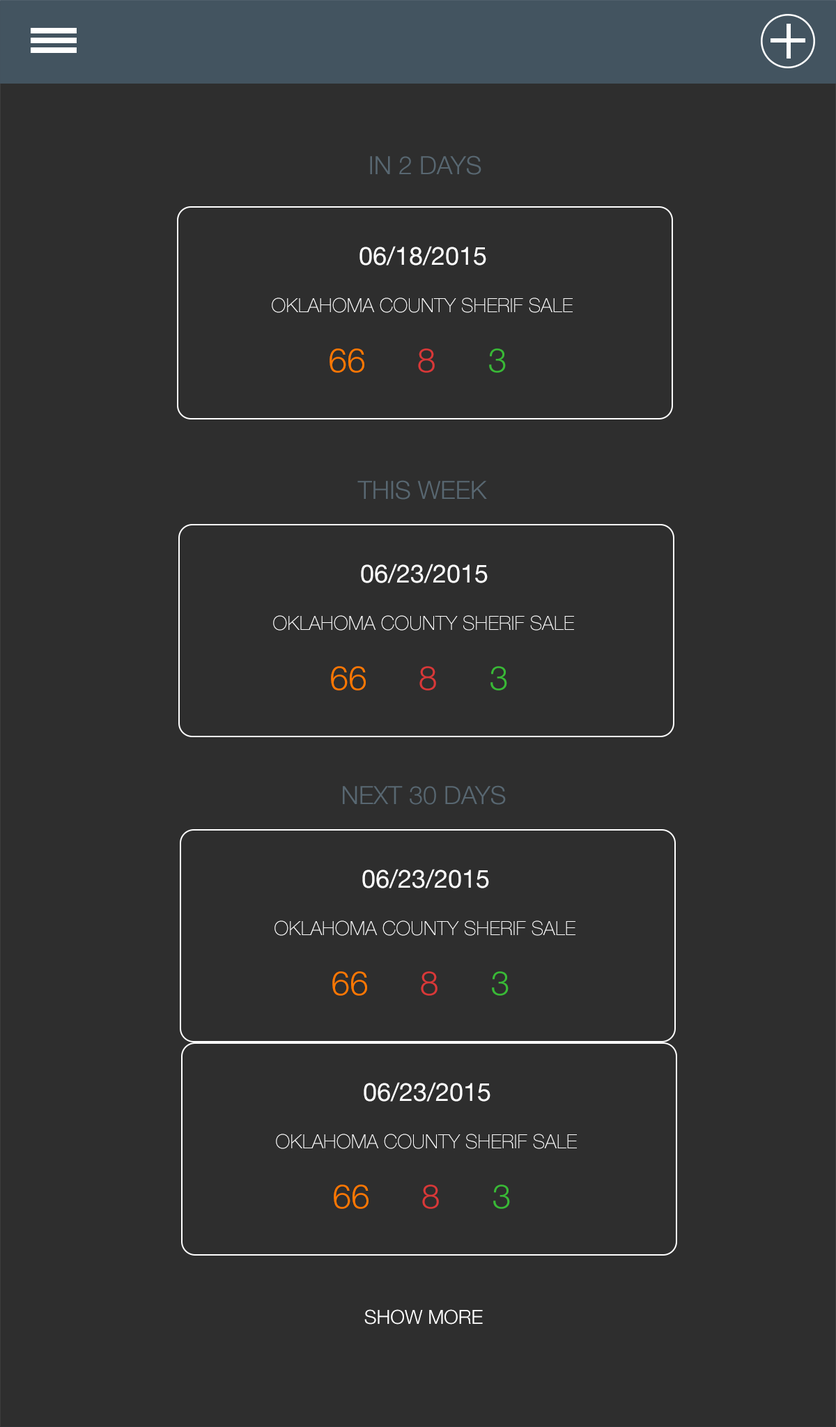
<style>
.page{position:relative;width:836px;height:1427px;background:#2e2e2e}
.page>*{position:absolute;margin:0}
.t1{font:25.1px "HelveticaNeue-Light";color:#586771;text-transform:uppercase}
.t2{font:25.1px "HelveticaNeue";color:#fefefe;text-transform:uppercase}
.t3{font:19.5px "HelveticaNeue-Thin";color:#fefefe;text-transform:uppercase}
.t4{font:33.4px "HelveticaNeue-Light";color:#ff7800;text-transform:uppercase}
.t5{font:33.4px "HelveticaNeue-Light";color:#d93838;text-transform:uppercase}
.t6{font:33.4px "HelveticaNeue-Light";color:#39b936;text-transform:uppercase}
.t7{font:19.5px "HelveticaNeue-Light";color:#ffffff;text-transform:uppercase}
</style>
<div class="page">
<p class="t1" style="left:370px;top:155px;width:111px;height:20px">In 2 days</p>
<p class="t2" style="left:359px;top:246px;width:127px;height:19px">06/18/2015</p>
<p class="t3" style="left:272px;top:297px;width:301px;height:16px">Oklahoma County Sherif Sale</p>
<p class="t4" style="left:329px;top:348px;width:35px;height:25px">66</p>
<p class="t5" style="left:418px;top:348px;width:17px;height:25px">8</p>
<p class="t6" style="left:489px;top:348px;width:17px;height:25px">3</p>
<p class="t1" style="left:357px;top:480px;width:130px;height:19px">This week</p>
<p class="t2" style="left:361px;top:564px;width:127px;height:19px">06/23/2015</p>
<p class="t3" style="left:273px;top:615px;width:301px;height:15px">Oklahoma County Sherif Sale</p>
<p class="t4" style="left:331px;top:666px;width:35px;height:24px">66</p>
<p class="t5" style="left:419px;top:666px;width:17px;height:24px">8</p>
<p class="t6" style="left:490px;top:666px;width:17px;height:24px">3</p>
<p class="t1" style="left:343px;top:785px;width:163px;height:20px">next 30 days</p>
<p class="t2" style="left:362px;top:869px;width:127px;height:19px">06/23/2015</p>
<p class="t3" style="left:274px;top:920px;width:301px;height:15px">Oklahoma County Sherif Sale</p>
<p class="t4" style="left:332px;top:971px;width:35px;height:24px">66</p>
<p class="t5" style="left:421px;top:971px;width:16px;height:24px">8</p>
<p class="t6" style="left:492px;top:971px;width:16px;height:24px">3</p>
<p class="t2" style="left:364px;top:1082px;width:126px;height:19px">06/23/2015</p>
<p class="t3" style="left:276px;top:1133px;width:301px;height:16px">Oklahoma County Sherif Sale</p>
<p class="t4" style="left:334px;top:1184px;width:34px;height:25px">66</p>
<p class="t5" style="left:422px;top:1184px;width:17px;height:25px">8</p>
<p class="t6" style="left:493px;top:1184px;width:17px;height:25px">3</p>
<p class="t7" style="left:364px;top:1309px;width:119px;height:15px">Show More</p>
</div>
